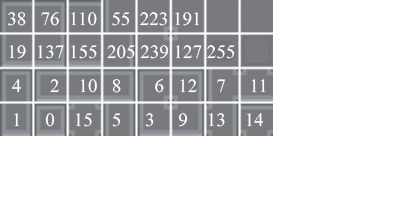
<style>
.page{position:relative;width:408px;height:204px;background:#ffffff}
.page>*{position:absolute;margin:0}
.t1{font:19px "MongolianBaiti";color:#ffffff;text-transform:uppercase}
</style>
<div class="page">
<p class="t1" style="left:8px;top:12px;width:258px;height:115px">38   76  110   55  223 191  <br>19  137 155  205 239 127 255<br> 4      2    10   8       6   12    7     11<br> 1     0    15    5     3     9    13    14</p>
</div>
